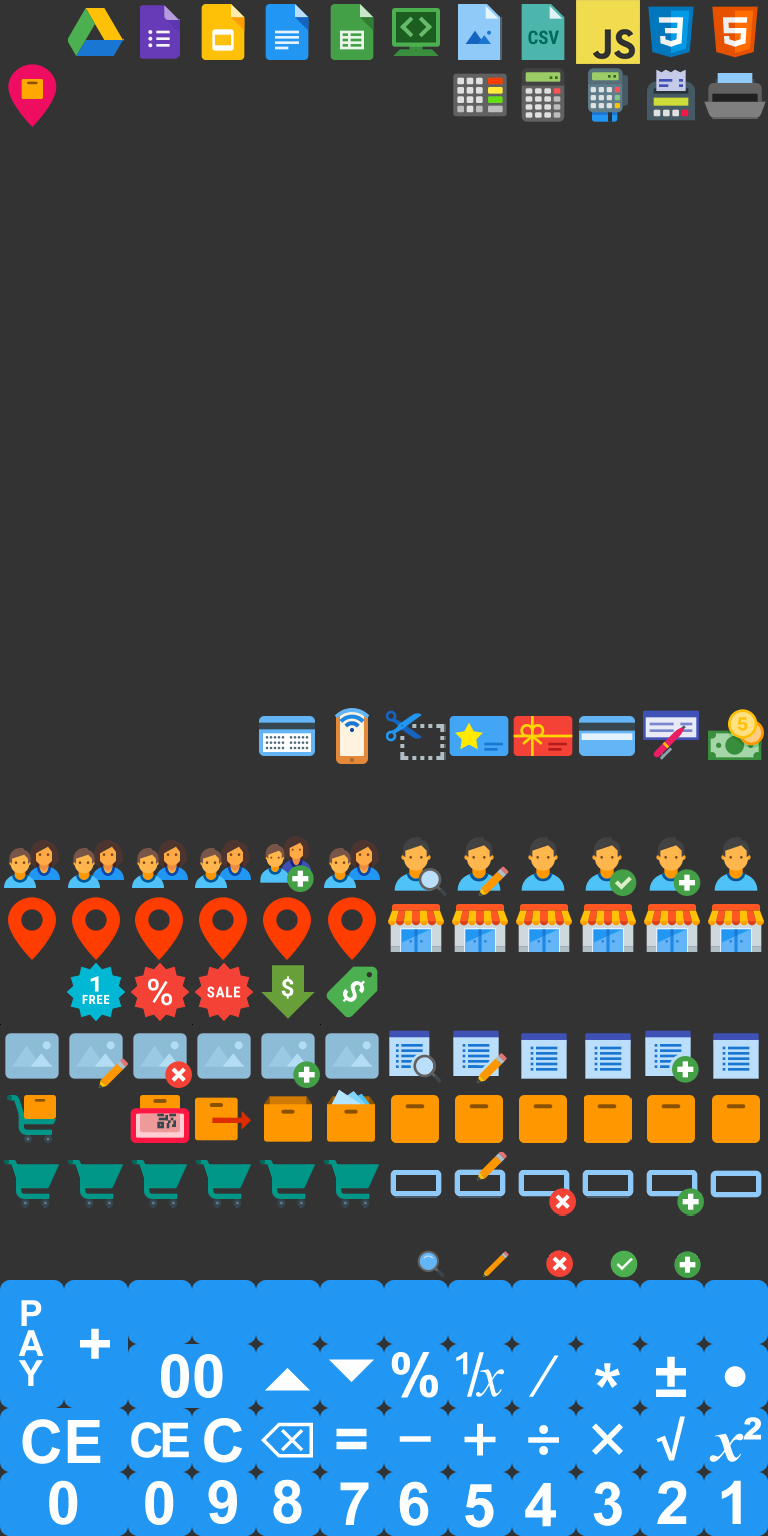
<style>
.page{position:relative;width:768px;height:1536px;background:#333333}
.page>*{position:absolute;margin:0}
.t1{font:36px/30px "Arial-BoldMT";color:#fefefe}
.t2{font:60px "Arial-BoldMT";color:#fefefe}
.t3{font:60px "ArialMT";letter-spacing:-0.1em;color:#fefefe}
.t4{font:60px "TimesNewRomanPS-ItalicMT";color:#fefefe}
.t5{font:60px "TimesNewRomanPS-BoldItalicMT";color:#fefefe}
.t6{font:72px "Arial-BoldMT";color:#fefefe}
.t7{font:48px "Arial-BoldMT";letter-spacing:-0.1em;color:#fefefe}
.t8{font:48px "MyriadPro-Bold";color:#fefefe}
.t9{font:60px "Arial-BoldMT";letter-spacing:-0.1em;color:#fefefe}
.t10{font:60px "MyriadPro-Bold";color:#fefefe}
</style>
<div class="page">
<p class="t1" style="left:18px;top:1300px;width:26px;height:86px">P<br>A<br>Y</p>
<p class="t2" style="left:80px;top:1328px;width:30px;height:31px">+</p>
<p class="t2" style="left:161px;top:1354px;width:62px;height:44px">00</p>
<p class="t2" style="left:391px;top:1352px;width:47px;height:46px">%</p>
<p class="t3" style="left:456px;top:1352px;width:48px;height:45px">¹/<span class="t4">x</span></p>
<p class="t5" style="left:529px;top:1355px;width:30px;height:42px">/</p>
<p class="t2" style="left:656px;top:1356px;width:30px;height:41px">±</p>
<p class="t6" style="left:594px;top:1363px;width:26px;height:25px">*</p>
<p class="t2" style="left:22px;top:1419px;width:79px;height:45px">CE</p>
<p class="t7" style="left:131px;top:1422px;width:58px;height:36px">CE</p>
<p class="t2" style="left:204px;top:1418px;width:38px;height:45px">C</p>
<p class="t8" style="left:656px;top:1416px;width:29px;height:45px">√</p>
<p class="t5" style="left:709px;top:1417px;width:52px;height:45px">x<span class="t2">²</span></p>
<p class="t9" style="left:336px;top:1428px;width:31px;height:22px">=</p>
<p class="t10" style="left:464px;top:1423px;width:32px;height:33px">+</p>
<p class="t10" style="left:528px;top:1425px;width:31px;height:30px">÷</p>
<p class="t10" style="left:592px;top:1423px;width:31px;height:32px">×</p>
<p class="t10" style="left:399px;top:1436px;width:32px;height:6px">−</p>
<p class="t2" style="left:49px;top:1480px;width:29px;height:45px">0</p>
<p class="t2" style="left:145px;top:1481px;width:29px;height:44px">0</p>
<p class="t2" style="left:208px;top:1480px;width:29px;height:44px">9</p>
<p class="t2" style="left:273px;top:1479px;width:29px;height:45px">8</p>
<p class="t2" style="left:399px;top:1481px;width:30px;height:45px">6</p>
<p class="t2" style="left:593px;top:1481px;width:29px;height:45px">3</p>
<p class="t2" style="left:657px;top:1480px;width:30px;height:44px">2</p>
<p class="t2" style="left:721px;top:1480px;width:20px;height:44px">1</p>
<p class="t2" style="left:340px;top:1482px;width:29px;height:43px">7</p>
<p class="t2" style="left:465px;top:1484px;width:29px;height:44px">5</p>
<p class="t2" style="left:525px;top:1483px;width:31px;height:44px">4</p>
</div>
